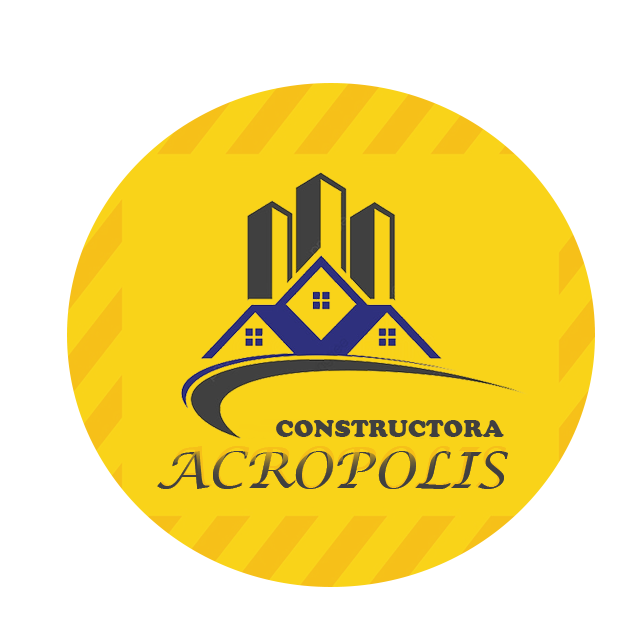
<style>
.page{position:relative;width:640px;height:640px;background:#ffffff}
.page>*{position:absolute;margin:0}
.t1{font:36px "CooperBlack";color:#404040;font-variant:small-caps}
.t2{font:78.9px "LucidaCalligraphy-Italic";font-variant:small-caps;scale:0.96 1}
.t3{font:50.2px "LucidaCalligraphy-Italic";color:#404040;font-variant:small-caps;scale:1.06 1}
.t4{font:37.6px "CorporateA-Bold";color:#404040;font-variant:small-caps;scale:1.06 1}
</style>
<div class="page">
<p class="t1" style="left:276px;top:420px;width:228px;height:17px">constructora</p>
<p class="t2" style="left:159px;top:446px;width:347px;height:42px">acropolis</p>
<p class="t2" style="left:159px;top:446px;width:347px;height:42px">acropolis</p>
<p class="t3" style="left:157px;top:451px;width:351px;height:38px"><span class="t4"><br></span>ACROPOLIS</p>
</div>
